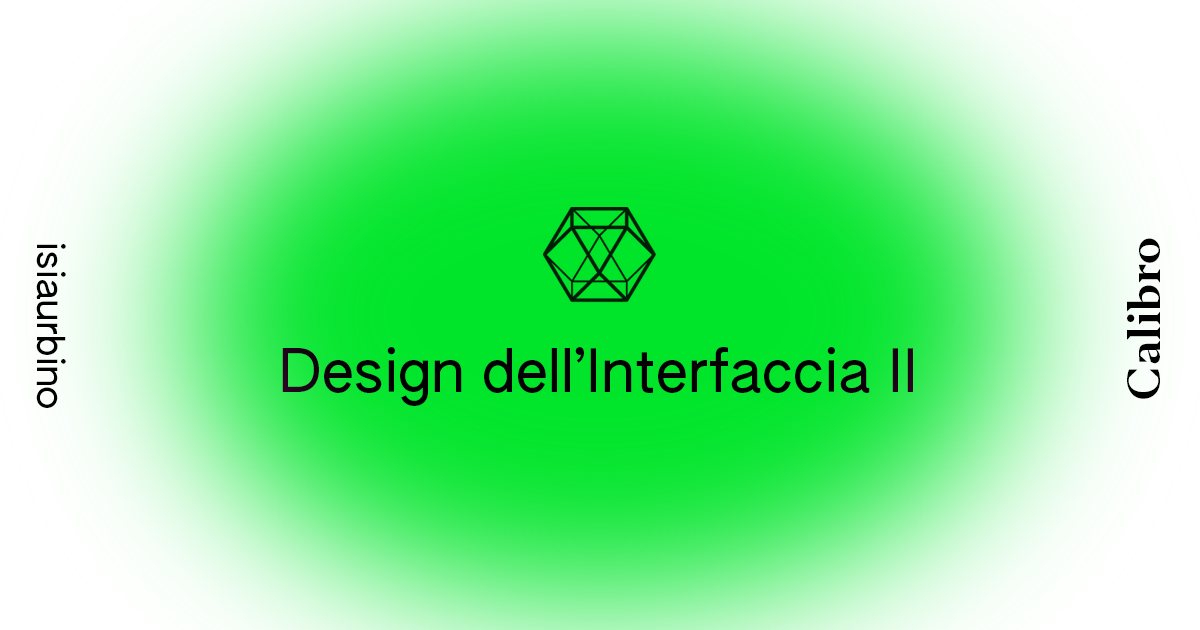
<style>
.page{position:relative;width:1200px;height:630px}
.page>*{position:absolute;margin:0}
.t1{font:37.5px "AUTHENTICSans-90";color:#000000}
.t2{font:43.8px "Editor-Bold";color:#000000}
.t3{font:58.3px "AUTHENTICSans-90";color:#040003}
</style>
<div class="page">
<p class="t1" style="left:36px;top:244px;width:30px;height:164px;rotate:90deg">isiaurbino</p>
<p class="t2" style="left:1127px;top:238px;width:33px;height:161px;rotate:-90deg">Calibro</p>
<p class="t3" style="left:282px;top:347px;width:631px;height:59px">Design dell’Interfaccia II</p>
</div>
